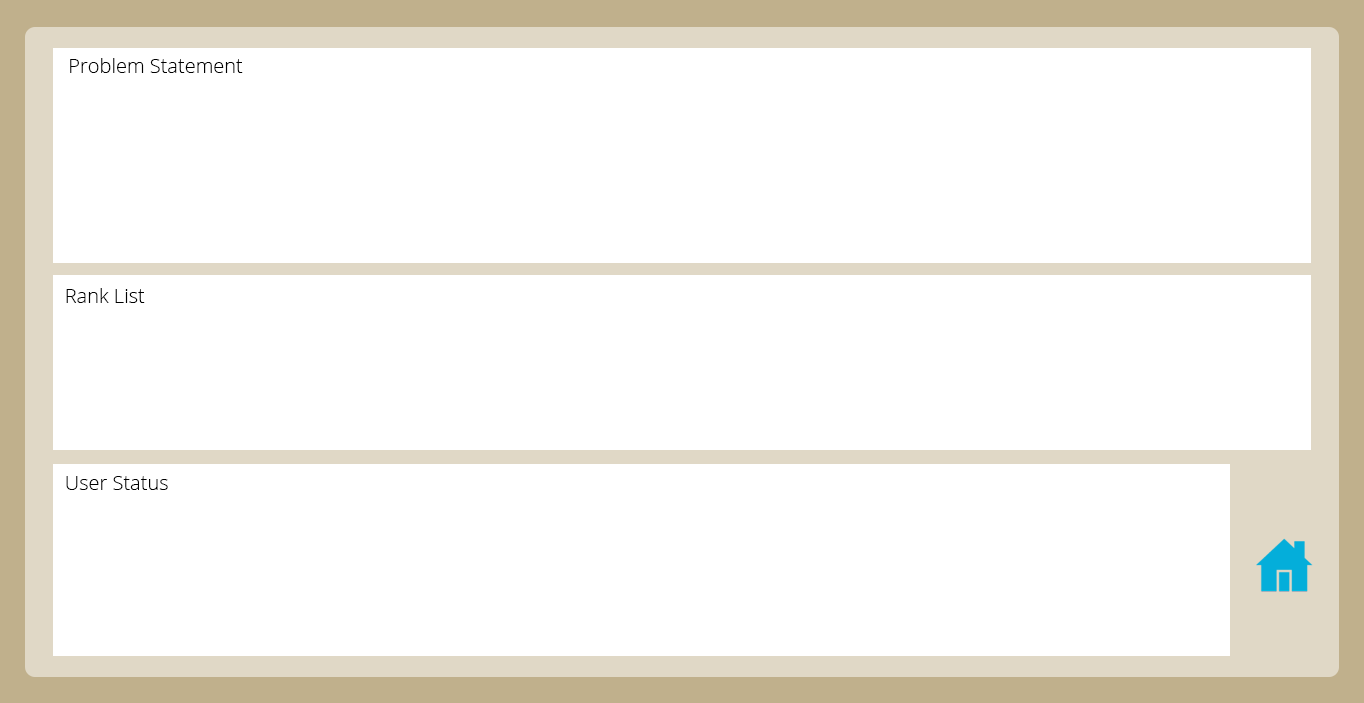
<style>
.page{position:relative;width:1364px;height:703px;background:#ffffff}
.page>*{position:absolute;margin:0}
.t1{font:20px "OpenSans-Light";color:#000000}
</style>
<div class="page">
<p class="t1" style="left:70px;top:58px;width:173px;height:15px">Problem Statement</p>
<p class="t1" style="left:66px;top:288px;width:79px;height:15px">Rank List</p>
<p class="t1" style="left:66px;top:476px;width:102px;height:14px">User Status</p>
</div>
